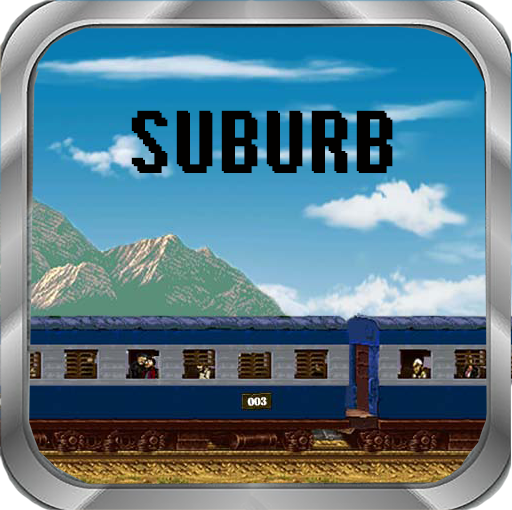
<style>
.page{position:relative;width:512px;height:510px}
.page>*{position:absolute;margin:0}
.t1{font:85.5px "Fixedsys";color:#020100;scale:0.84 1}
</style>
<div class="page">
<p class="t1" style="left:131px;top:110px;width:260px;height:61px">SUBURB</p>
<p class="t1" style="left:133px;top:112px;width:260px;height:61px">SUBURB</p>
</div>
